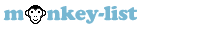
<style>
.page{position:relative;width:200px;height:35px;background:#ffffff}
.page>*{position:absolute;margin:0}
.t1{font:20px "CooperBlackStd";letter-spacing:-0.025em;color:#77b7d2}
</style>
<div class="page">
<p class="t1" style="left:3px;top:6px;width:134px;height:18px">m    nkey-list</p>
</div>
